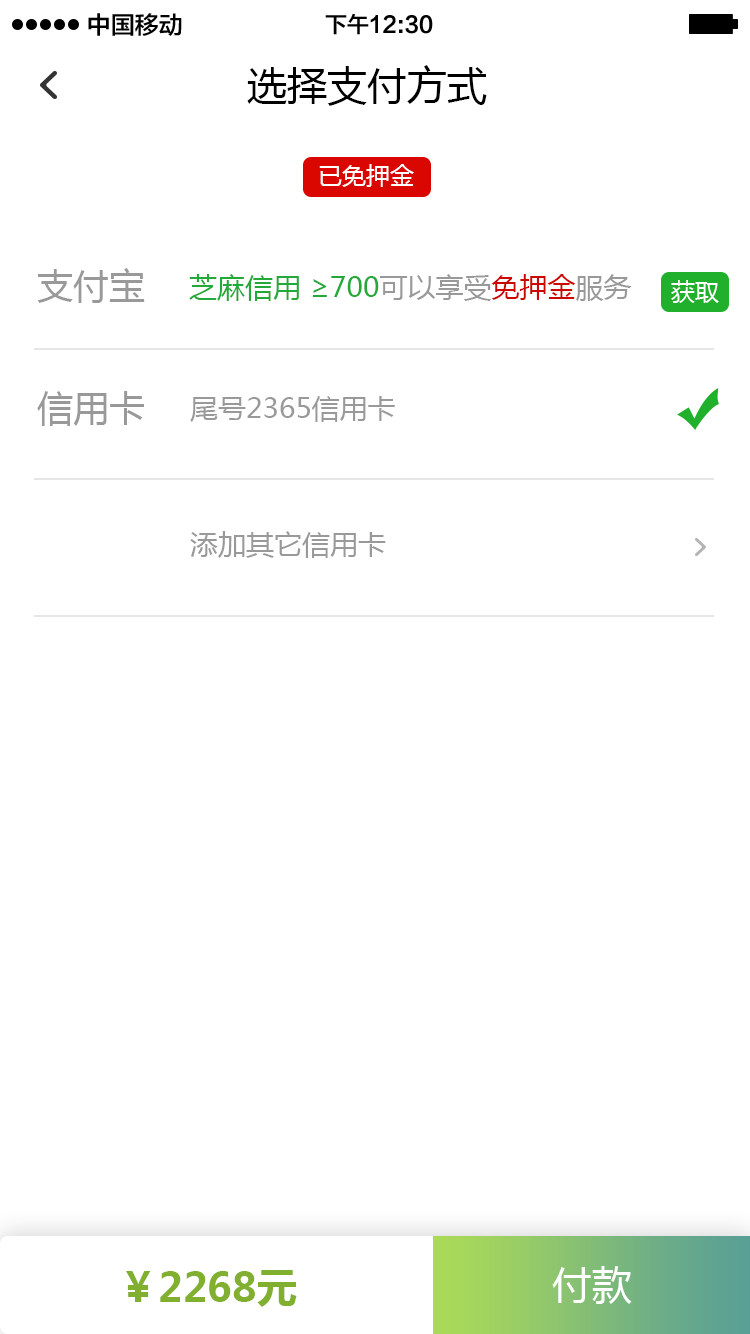
<style>
.page{position:relative;width:750px;height:1334px;background:#ffffff}
.page>*{position:absolute;margin:0}
.t1{font:24px "FZLTZHK--GBK1-0";color:#000000}
.t2{font:22px "FZLTZHK--GBK1-0";color:#000000}
.t3{font:40px "MicrosoftYaHei";color:#000000}
.t4{font:24px "MicrosoftYaHei";color:#ffffff}
.t5{font:36px "MicrosoftYaHei";color:#999999}
.t6{font:28px "MicrosoftYaHei";color:#22a938}
.t7{font:28px "MicrosoftYaHei";color:#999999}
.t8{font:28px "MicrosoftYaHei";color:#cc0700}
.t9{font:40px "MicrosoftYaHei-Bold";color:#81af2f}
.t10{font:40px "MicrosoftYaHei";color:#ffffff}
</style>
<div class="page">
<p class="t1" style="left:88px;top:13px;width:94px;height:23px">中国移动</p>
<p class="t2" style="left:325px;top:14px;width:108px;height:21px">下午12:30</p>
<p class="t3" style="left:247px;top:65px;width:240px;height:41px">选择支付方式</p>
<p class="t4" style="left:319px;top:164px;width:95px;height:23px">已免押金</p>
<p class="t5" style="left:37px;top:268px;width:108px;height:35px">支付宝</p>
<p class="t6" style="left:189px;top:274px;width:443px;height:27px">芝麻信用 ≥700<span class="t7">可以享受</span><span class="t8">免押金</span><span class="t7">服务</span></p>
<p class="t4" style="left:671px;top:280px;width:48px;height:23px">获取</p>
<p class="t5" style="left:37px;top:391px;width:107px;height:35px">信用卡</p>
<p class="t7" style="left:190px;top:396px;width:205px;height:26px">尾号2365信用卡</p>
<p class="t7" style="left:190px;top:531px;width:196px;height:27px">添加其它信用卡</p>
<p class="t9" style="left:126px;top:1270px;width:171px;height:37px">￥2268元</p>
<p class="t10" style="left:552px;top:1266px;width:80px;height:38px">付款</p>
</div>
